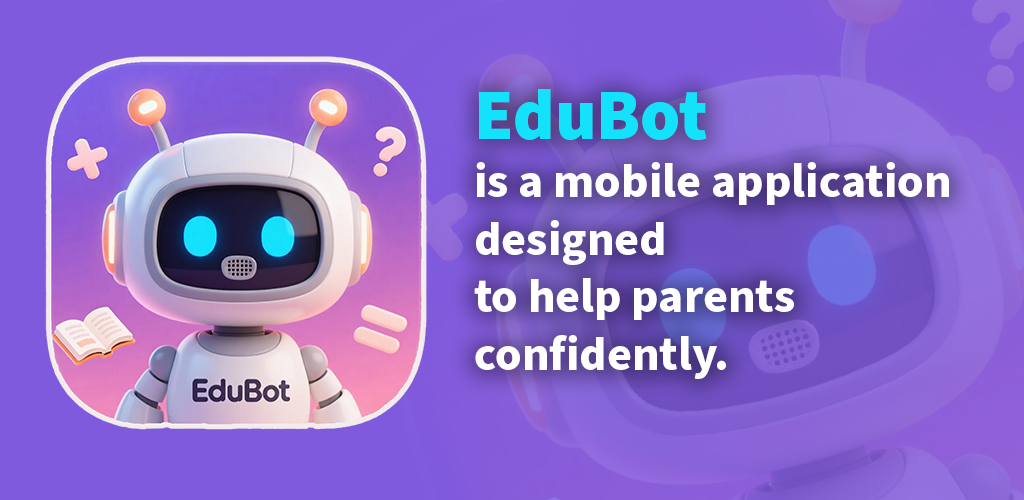
<style>
.page{position:relative;width:1024px;height:500px}
.page>*{position:absolute;margin:0}
.t1{font:48px "SourceSansPro-Bold";color:#ffffff}
.t2{font:72px "SourceSansPro-Black";color:#14e2fa}
</style>
<div class="page">
<p class="t1" style="left:474px;top:89px;width:475px;height:290px"><span class="t2">EduBot <br></span>is a mobile application <br>designed <br>to help parents <br>confidently.</p>
</div>
